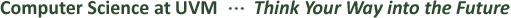
<style>
.page{position:relative;width:511px;height:18px;background:#ffffff}
.page>*{position:absolute;margin:0}
.t1{font:20px "Calibri-BoldItalic";color:#2b4a2e}
.t2{font:20px "Calibri-Bold";color:#2b4a2e}
</style>
<div class="page">
<p class="t1" style="left:0px;top:0px;width:510px;height:18px"><span class="t2">Computer Science at UVM        </span>Think Your Way into the Future</p>
</div>
